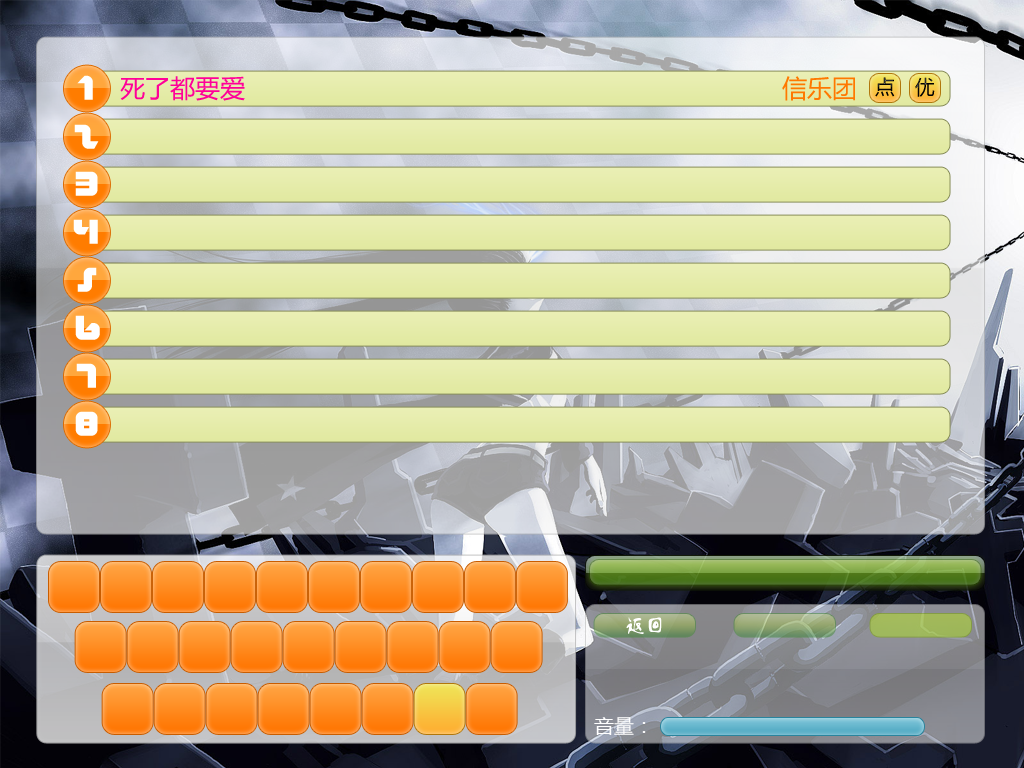
<style>
.page{position:relative;width:1024px;height:768px}
.page>*{position:absolute;margin:0}
.t1{font:30px "Nordic";color:#ffffff}
.t2{font:25px "MicrosoftYaHei";color:#ff0099}
.t3{font:25px "MicrosoftYaHei";color:#ff7800}
.t4{font:19.8px "MicrosoftYaHei"}
.t5{font:20px "FZLXTFW--GB1-0";color:#ffffff}
.t6{font:20px "MicrosoftYaHei";color:#ffffff}
</style>
<div class="page">
<p class="t1" style="left:77px;top:75px;width:16px;height:25px">1</p>
<p class="t2" style="left:120px;top:76px;width:125px;height:25px">死了都要爱</p>
<p class="t3" style="left:782px;top:76px;width:73px;height:25px">信乐团</p>
<p class="t4" style="left:875px;top:77px;width:20px;height:20px">点</p>
<p class="t4" style="left:915px;top:77px;width:20px;height:20px">优</p>
<p class="t1" style="left:74px;top:124px;width:25px;height:25px">2</p>
<p class="t1" style="left:75px;top:171px;width:23px;height:25px">3</p>
<p class="t1" style="left:73px;top:219px;width:25px;height:25px">4</p>
<p class="t1" style="left:77px;top:267px;width:20px;height:25px">5</p>
<p class="t1" style="left:75px;top:315px;width:25px;height:25px">6</p>
<p class="t1" style="left:76px;top:363px;width:20px;height:25px">7</p>
<p class="t1" style="left:75px;top:411px;width:23px;height:25px">8</p>
<p class="t5" style="left:626px;top:617px;width:36px;height:17px">返回</p>
<p class="t6" style="left:594px;top:717px;width:52px;height:18px">音量：</p>
</div>
